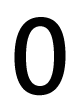
<style>
.page{position:relative;width:80px;height:110px;background:#ffffff}
.page>*{position:absolute;margin:0}
.t1{font:100px "MicrosoftJhengHeiBold";color:#010101}
</style>
<div class="page">
<p class="t1" style="left:14px;top:17px;width:52px;height:79px">0</p>
</div>
